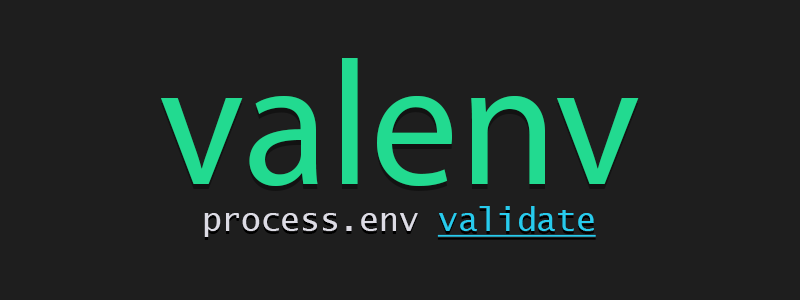
<style>
.page{position:relative;width:800px;height:300px;background:#1e1e1e}
.page>*{position:absolute;margin:0}
.t1{font:177.3px "MyriadPro-Regular";color:#22da90}
.t2{font:32.7px "LucidaConsole";color:#dddce5}
.t3{font:32.7px "LucidaConsole";color:#28cbed;text-decoration:underline}
</style>
<div class="page">
<p class="t1" style="left:161px;top:58px;width:478px;height:128px">valenv</p>
<p class="t2" style="left:204px;top:206px;width:392px;height:31px">process.env <span class="t3">validate</span></p>
</div>
